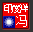
<style>
.page{position:relative;width:33px;height:32px;background:#f20000}
.page>*{position:absolute;margin:0}
.t1{font:10.4px "SimSun";letter-spacing:-0.25em;color:#ffffff}
.t2{font:11.7px "SimSun";color:#ffffff}
</style>
<div class="page">
<p class="t1" style="left:4px;top:4px;width:24px;height:9px">印度洋</p>
<p class="t2" style="left:16px;top:15px;width:11px;height:12px">冯</p>
</div>
